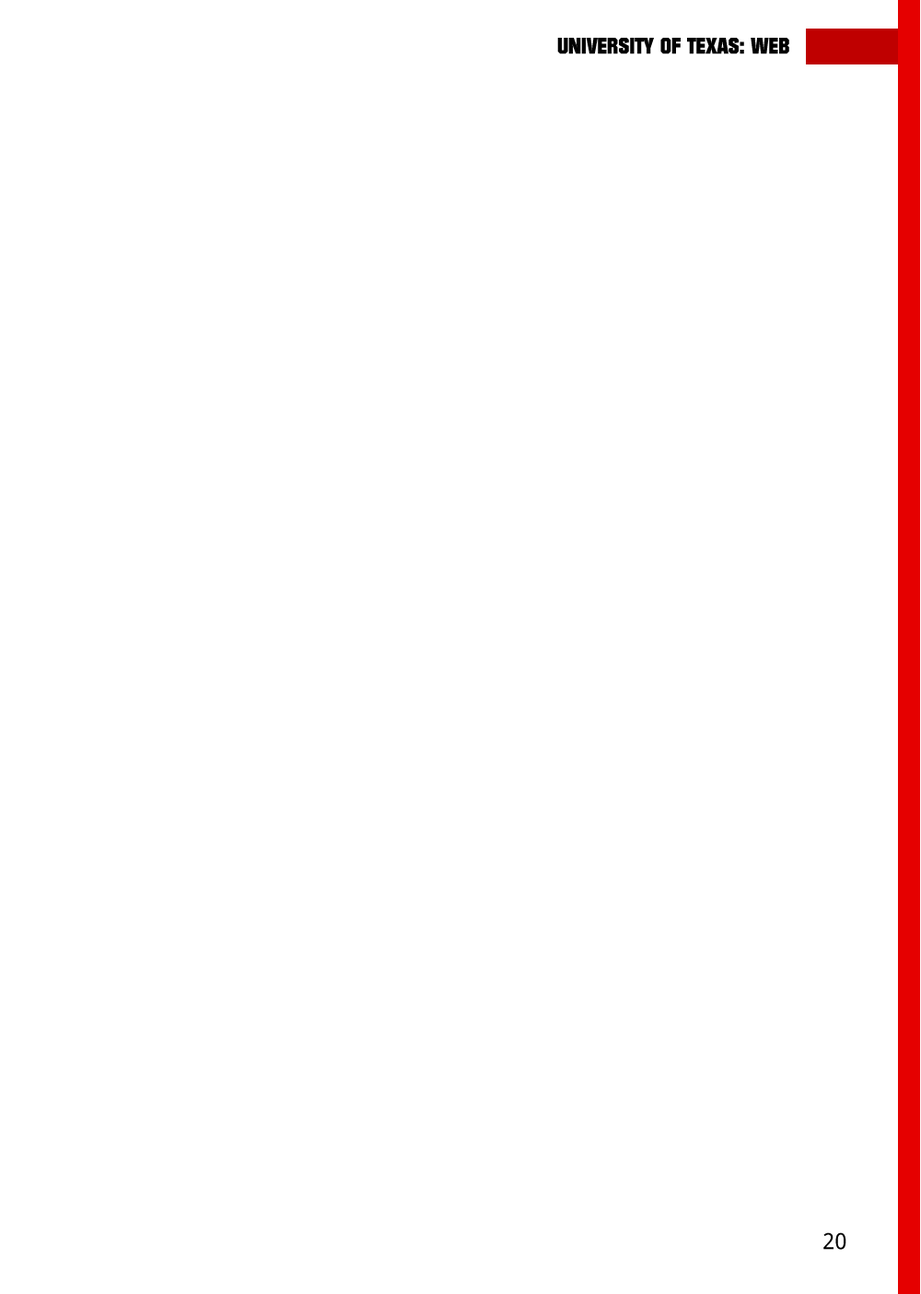
<style>
.page{position:relative;width:921px;height:1294px;background:#ffffff}
.page>*{position:absolute;margin:0}
.t1{font:22.1px "Autumn";color:#000000}
.t2{font:22.1px "DroidSans";color:#000000}
</style>
<div class="page">
<p class="t1" style="left:557px;top:38px;width:233px;height:16px">UNIVERSITY OF TEXAS: WEB</p>
<p class="t2" style="left:824px;top:1233px;width:23px;height:17px">20</p>
</div>
